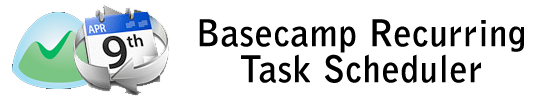
<style>
.page{position:relative;width:550px;height:100px;background:#ffffff}
.page>*{position:absolute;margin:0}
.t1{font:36px/36px "BellGothicStd-Bold";color:#000000;font-weight:bold}
</style>
<div class="page">
<p class="t1" style="left:199px;top:19px;width:325px;height:64px;text-align:center">Basecamp Recurring <br>Task Scheduler</p>
</div>
